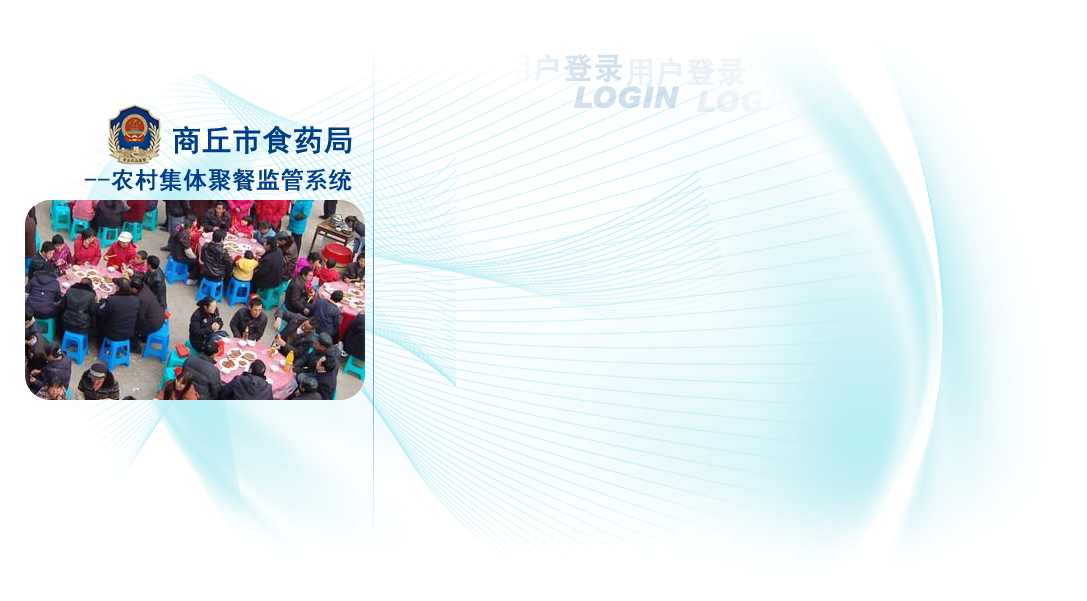
<style>
.page{position:relative;width:1087px;height:601px;background:#ffffff}
.page>*{position:absolute;margin:0}
.t1{font:30px "SimHei";letter-spacing:0.05em;color:#003d86;font-weight:bold}
.t2{font:24px "SimHei";letter-spacing:0.05em;color:#003d86;font-weight:bold}
</style>
<div class="page">
<p class="t1" style="left:173px;top:125px;width:179px;height:30px">商丘市食药局</p>
<p class="t2" style="left:84px;top:168px;width:268px;height:23px">--农村集体聚餐监管系统</p>
</div>
